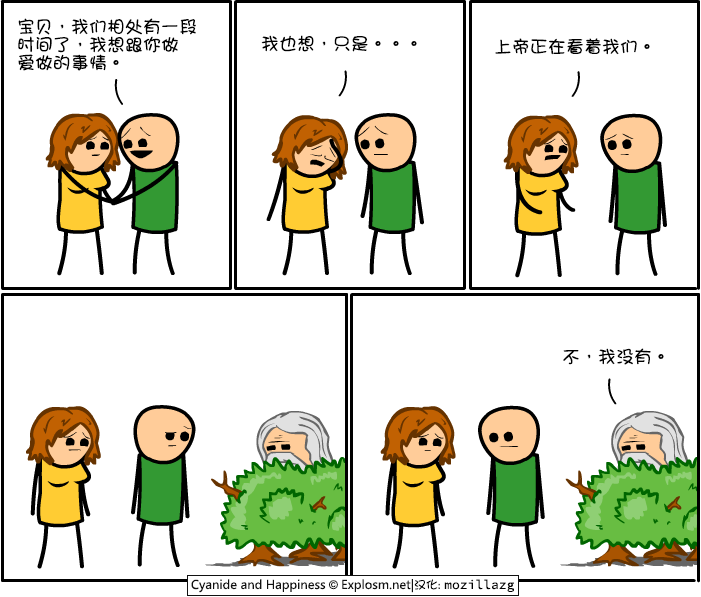
<style>
.page{position:relative;width:701px;height:597px;background:#ffffff}
.page>*{position:absolute;margin:0}
.t1{font:18px/18px "DFGirl";color:#000000}
.t2{font:18px "DFGirl";color:#000000}
</style>
<div class="page">
<p class="t1" style="left:18px;top:18px;width:178px;height:53px">宝贝，我们相处有一段<br>时间了，我想跟你做<br>爱做的事情。</p>
<p class="t2" style="left:261px;top:35px;width:156px;height:17px">我也想，只是。。。</p>
<p class="t2" style="left:495px;top:38px;width:155px;height:17px">上帝正在看着我们。</p>
<p class="t2" style="left:563px;top:348px;width:101px;height:17px">不，我没有。</p>
</div>
